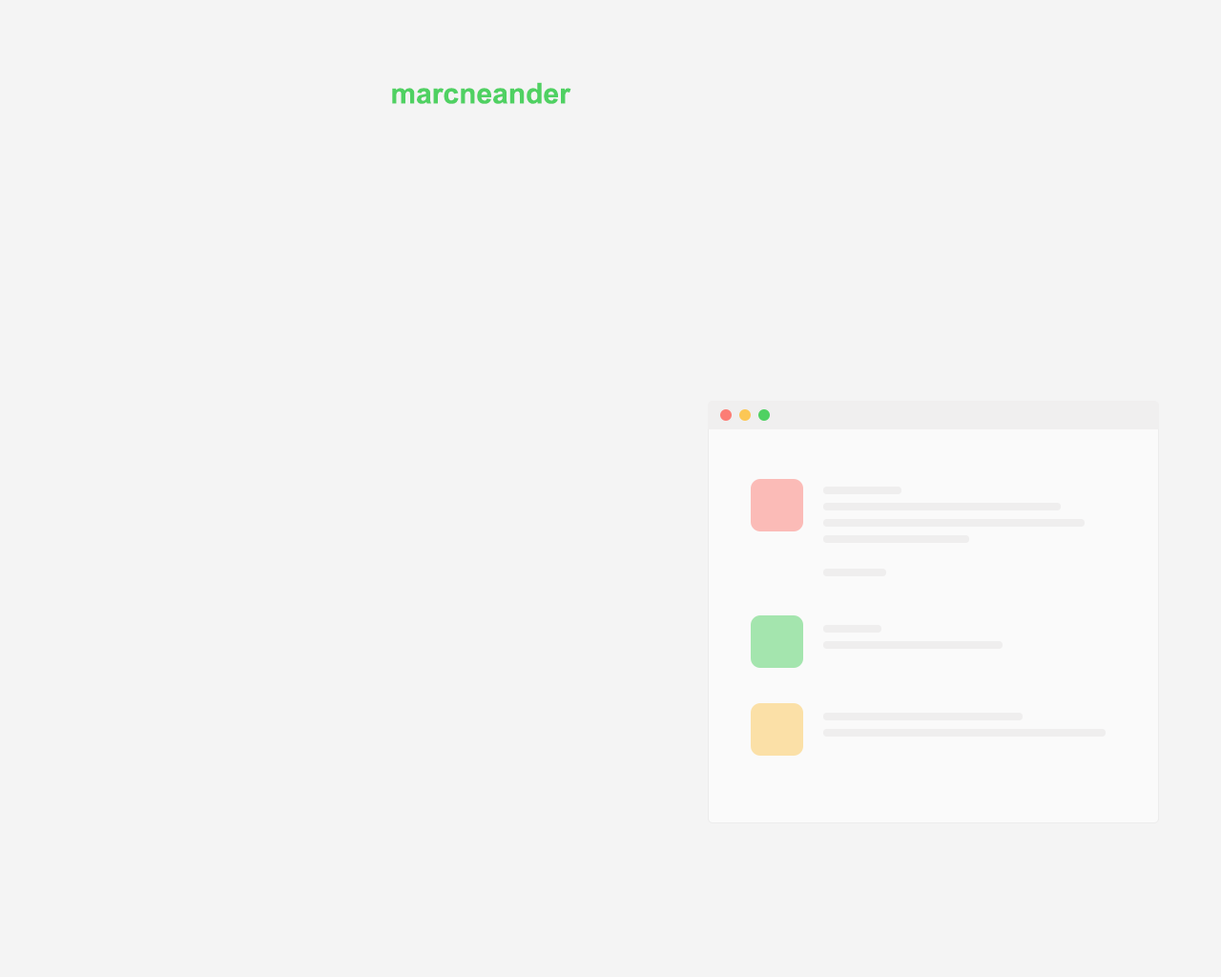
<style>
.page{position:relative;width:1221px;height:977px;background:#f4f4f4}
.page>*{position:absolute;margin:0}
.t1{font:28.6px "Arial-BoldMT";color:#4fd162}
</style>
<div class="page">
<p class="t1" style="left:392px;top:82px;width:179px;height:22px">marcneander</p>
</div>
